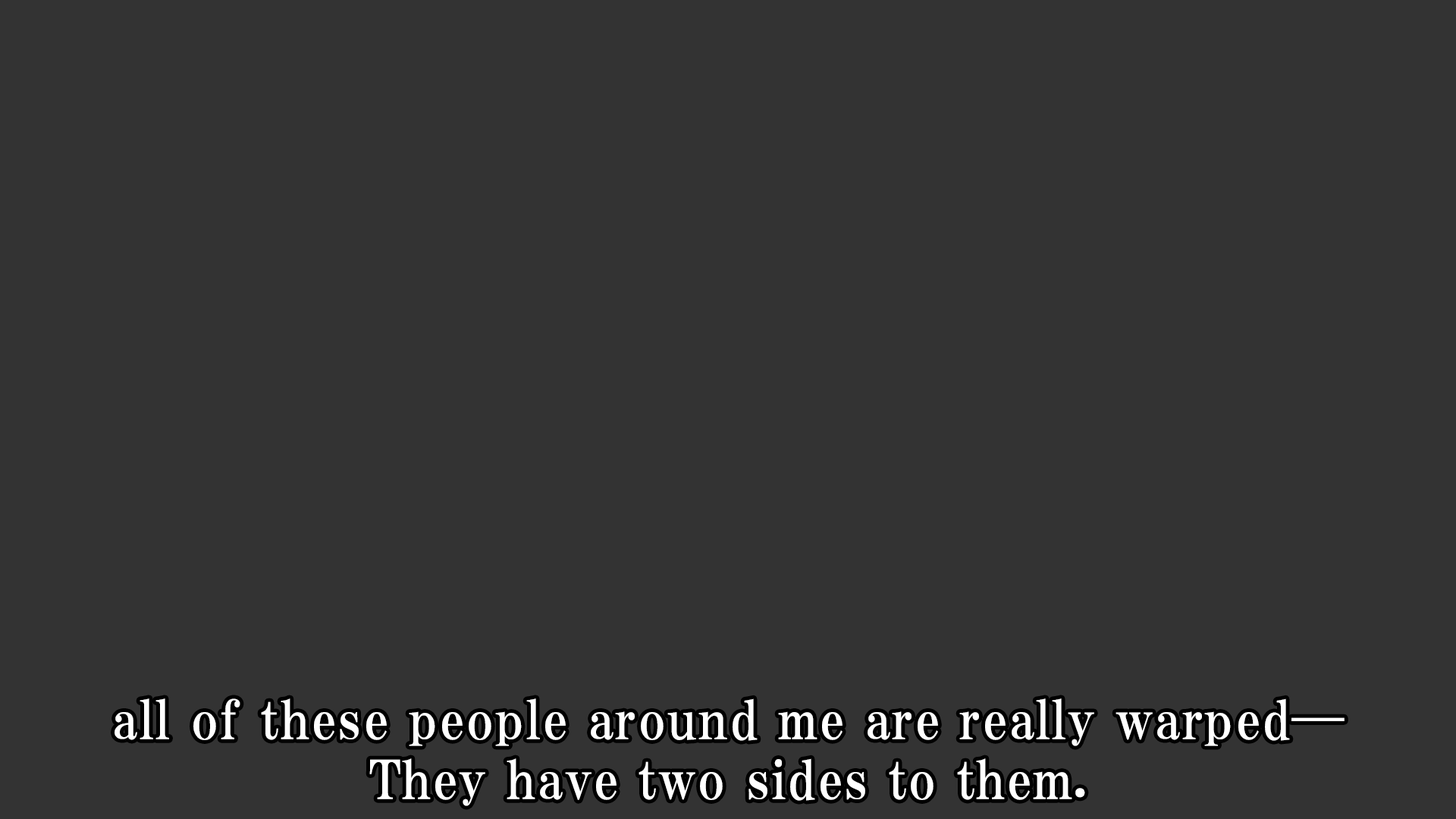
<style>
.page{position:relative;width:1456px;height:819px;background:#333333}
.page>*{position:absolute;margin:0}
.t1{font:53.1px/59.9px "HGPMinchoE";letter-spacing:0.025em;color:#ffffff}
</style>
<div class="page">
<p class="t1" style="left:115px;top:698px;width:1230px;height:108px;text-align:center">all of these people around me are really warped—<br>They have two sides to them.</p>
</div>
